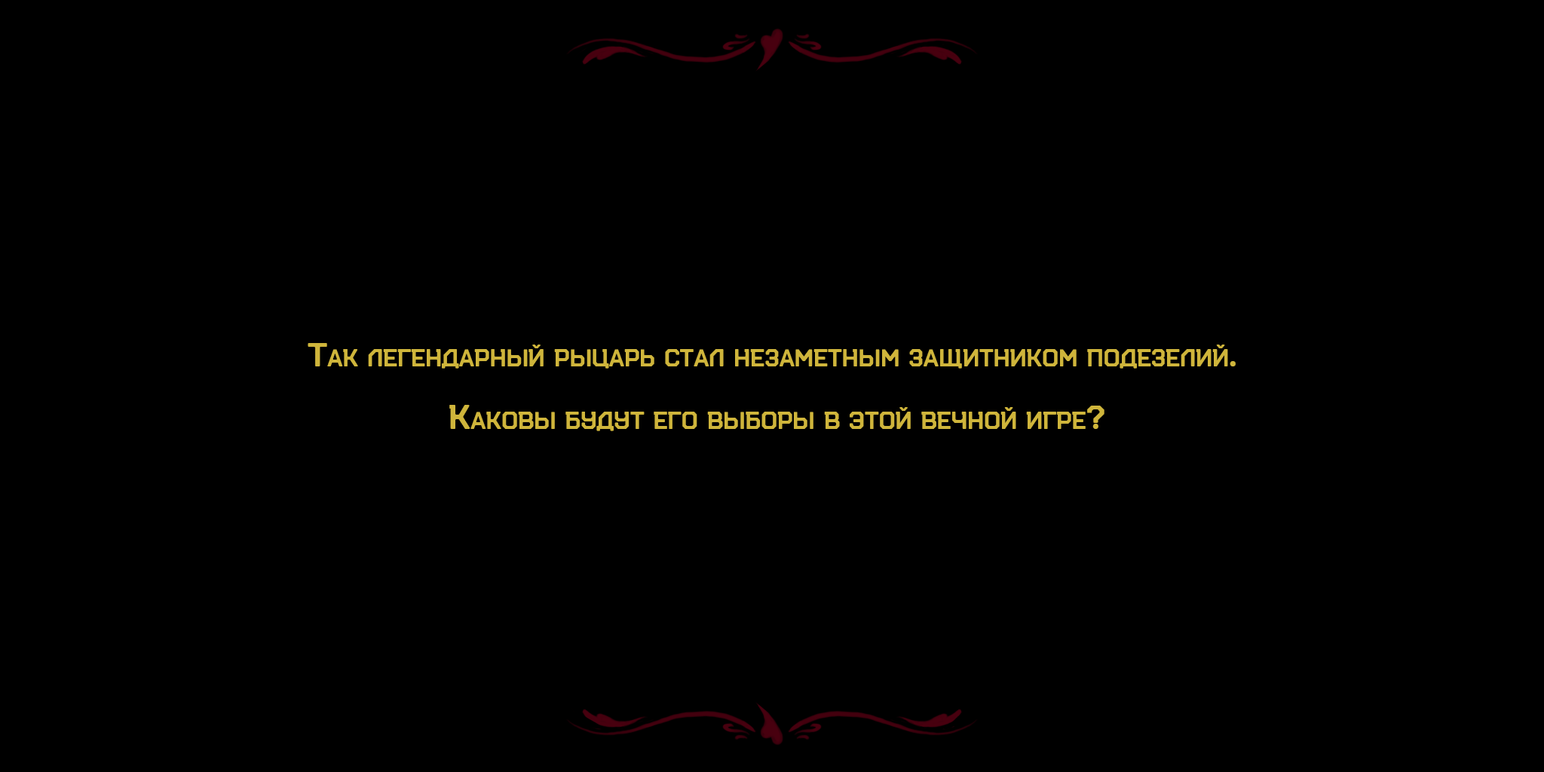
<style>
.page{position:relative;width:1544px;height:772px;background:#000000}
.page>*{position:absolute;margin:0}
.t1{font:34px/62.3px "ArturitoSlab-Bold";color:#cfb53b;font-variant:small-caps}
</style>
<div class="page">
<p class="t1" style="left:308px;top:343px;width:928px;height:88px;text-align:center">Так легендарный рыцарь стал незаметным защитником подезелий. <br>Каковы будут его выборы в этой вечной игре?</p>
</div>
